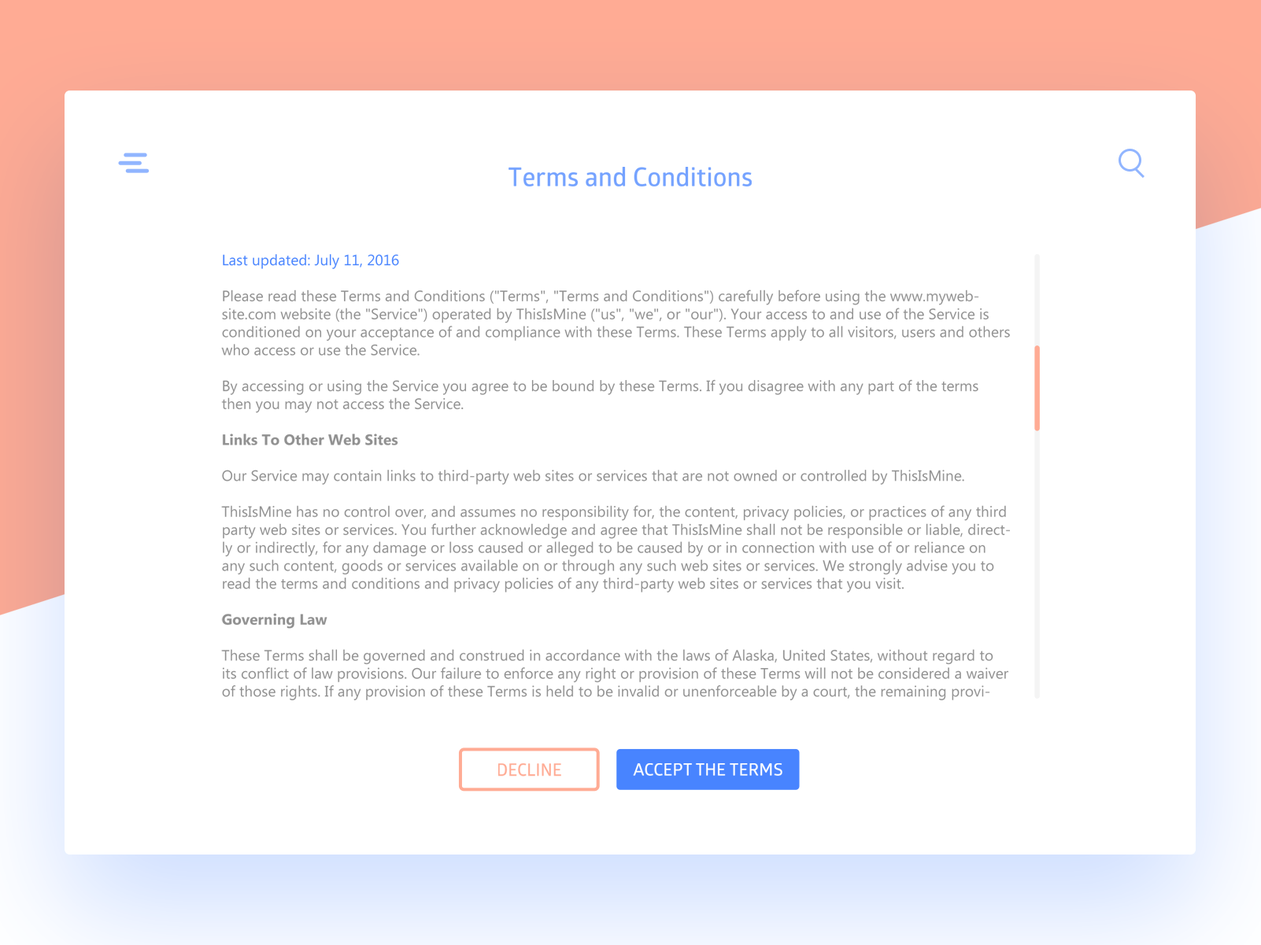
<style>
.page{position:relative;width:1261px;height:945px;background:#ffffff}
.page>*{position:absolute;margin:0}
.t1{font:25.9px "GloberSemiBoldFree";color:#74a2ff}
.t2{font:15px "LaoUI";color:#909090}
.t3{font:15px "LaoUI";color:#4884ff}
.t4{font:15px "LaoUI-Bold";color:#909090}
.t5{font:17px "GloberSemiBoldFree";color:#ffab94;text-transform:uppercase}
.t6{font:17px "GloberSemiBoldFree";color:#ffffff;text-transform:uppercase}
</style>
<div class="page">
<p class="t1" style="left:509px;top:167px;width:243px;height:20px">Terms and Conditions</p>
<p class="t2" style="left:221px;top:254px;width:789px;height:447px"><span class="t3">Last updated: July 11, 2016<br></span><br>Please read these Terms and Conditions ("Terms", "Terms and Conditions") carefully before using the www.mywebsite.com website (the "Service") operated by ThisIsMine ("us", "we", or "our"). Your access to and use of the Service is conditioned on your acceptance of and compliance with these Terms. These Terms apply to all visitors, users and others who access or use the Service.<br><br>By accessing or using the Service you agree to be bound by these Terms. If you disagree with any part of the terms then you may not access the Service.<br><br><span class="t4">Links To Other Web Sites<br></span><br>Our Service may contain links to third-party web sites or services that are not owned or controlled by ThisIsMine.<br><br>ThisIsMine has no control over, and assumes no responsibility for, the content, privacy policies, or practices of any third party web sites or services. You further acknowledge and agree that ThisIsMine shall not be responsible or liable, directly or indirectly, for any damage or loss caused or alleged to be caused by or in connection with use of or reliance on any such content, goods or services available on or through any such web sites or services. We strongly advise you to read the terms and conditions and privacy policies of any third-party web sites or services that you visit.<br><br><span class="t4">Governing Law<br></span><br>These Terms shall be governed and construed in accordance with the laws of Alaska, United States, without regard to its conflict of law provisions. Our failure to enforce any right or provision of these Terms will not be considered a waiver of those rights. If any provision of these Terms is held to be invalid or unenforceable by a court, the remaining provisions of these Terms will remain in effect. These Terms constitute the entire agreement between us regarding our Service, and supersede and replace any prior agreements we might have between us regarding the Service.<br><br><span class="t4">Changes<br></span><br>We reserve the right, at our sole discretion, to modify or replace these Terms at any time. If a revision is material we will try to provide at least 15 days notice prior to any new terms taking effect. What constitutes a material change will be determined at our sole discretion.<br><br>By continuing to access or use our Service after those revisions become effective, you agree to be bound by the revised terms. If you do not agree to the new terms, please stop using the Service.<br><br>Contact Us<br><br>If you have any questions about these Terms, please contact us.</p>
<p class="t5" style="left:498px;top:764px;width:63px;height:13px">Decline</p>
<p class="t6" style="left:633px;top:764px;width:150px;height:12px">Accept the Terms</p>
</div>
